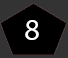
<style>
.page{position:relative;width:68px;height:58px;background:#000000}
.page>*{position:absolute;margin:0}
.t1{font:30px "MyriadPro-Regular";color:#ffffff}
</style>
<div class="page">
<p class="t1" style="left:25px;top:20px;width:14px;height:20px">8</p>
</div>
